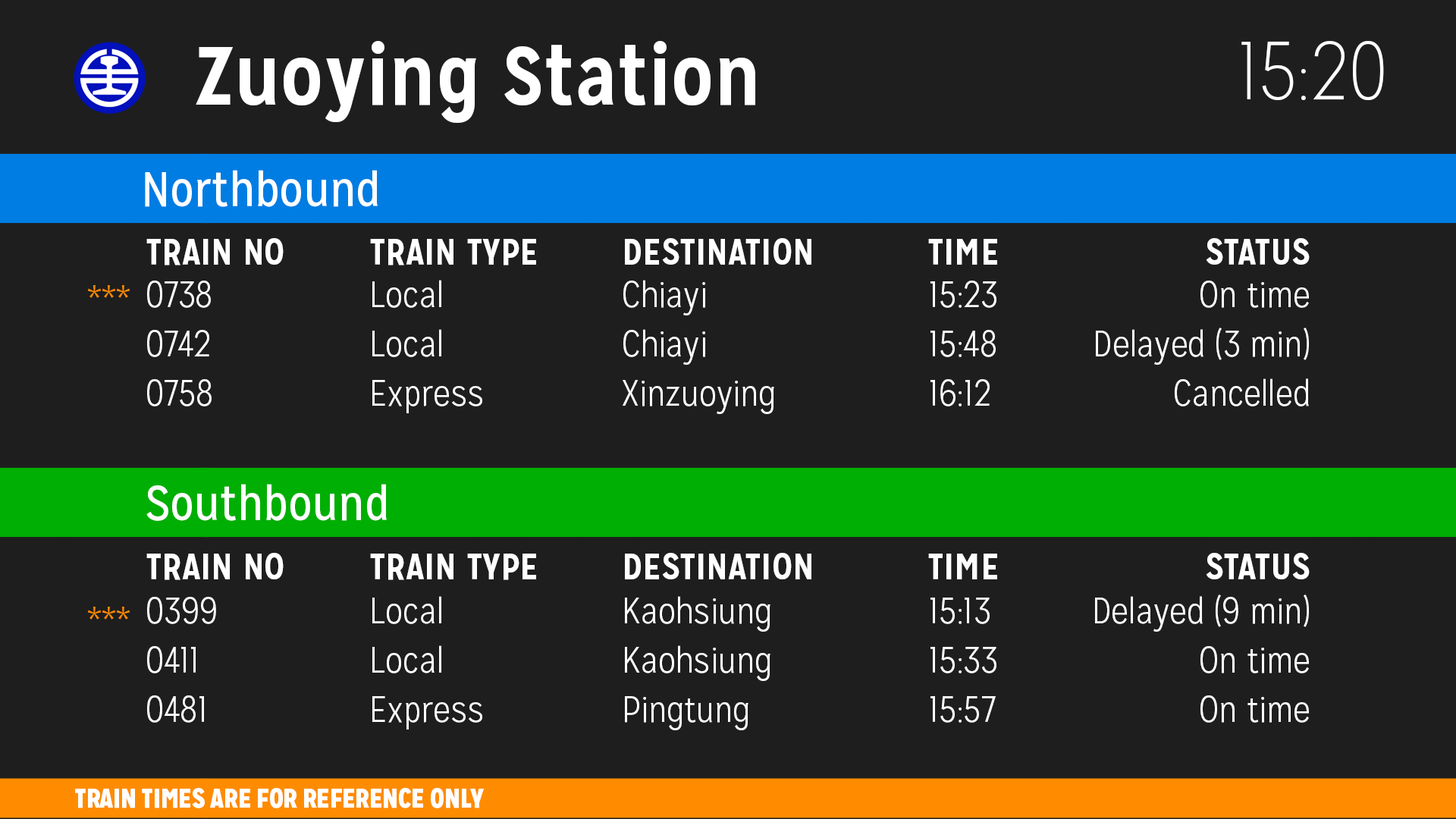
<style>
.page{position:relative;width:1456px;height:819px;background:#1e1e1e}
.page>*{position:absolute;margin:0}
.t1{font:82.2px "MissionGothic-Bold";color:#ffffff}
.t2{font:82.2px "MissionGothic-Thin";color:#ffffff}
.t3{font:49.1px "MissionGothic-Regular";color:#ffffff}
.t4{font:36.7px "MissionGothic-Bold";color:#ffffff}
.t5{font:36.7px "MissionGothic-Light";color:#ffffff}
.t6{font:36.7px "MissionGothic-Light";color:#ff8c00}
.t7{font:27.4px "MissionGothic-Black";color:#ffffff}
</style>
<div class="page">
<p class="t1" style="left:196px;top:41px;width:559px;height:82px">Zuoying Station</p>
<p class="t2" style="left:1241px;top:41px;width:143px;height:59px">15:20</p>
<p class="t3" style="left:145px;top:170px;width:233px;height:37px">Northbound</p>
<p class="t4" style="left:146px;top:238px;width:138px;height:27px">TRAIN NO</p>
<p class="t4" style="left:370px;top:239px;width:166px;height:26px">TRAIN TYPE</p>
<p class="t4" style="left:625px;top:238px;width:186px;height:27px">DESTINATION</p>
<p class="t4" style="left:928px;top:239px;width:69px;height:26px">TIME</p>
<p class="t4" style="left:1206px;top:238px;width:104px;height:27px">STATUS</p>
<p class="t5" style="left:147px;top:281px;width:64px;height:27px">0738</p>
<p class="t5" style="left:372px;top:280px;width:69px;height:28px">Local</p>
<p class="t5" style="left:623px;top:280px;width:82px;height:35px">Chiayi</p>
<p class="t5" style="left:930px;top:281px;width:66px;height:27px">15:23</p>
<p class="t5" style="left:1200px;top:281px;width:109px;height:27px">On time</p>
<p class="t6" style="left:87px;top:285px;width:43px;height:13px">***</p>
<p class="t5" style="left:147px;top:330px;width:62px;height:27px">0742</p>
<p class="t5" style="left:372px;top:329px;width:69px;height:28px">Local</p>
<p class="t5" style="left:623px;top:329px;width:82px;height:36px">Chiayi</p>
<p class="t5" style="left:930px;top:330px;width:66px;height:27px">15:48</p>
<p class="t5" style="left:1096px;top:328px;width:213px;height:37px">Delayed (3 min)</p>
<p class="t5" style="left:147px;top:379px;width:65px;height:27px">0758</p>
<p class="t5" style="left:372px;top:380px;width:110px;height:33px">Express</p>
<p class="t5" style="left:623px;top:380px;width:151px;height:34px">Xinzuoying</p>
<p class="t5" style="left:930px;top:379px;width:60px;height:27px">16:12</p>
<p class="t5" style="left:1175px;top:378px;width:134px;height:28px">Cancelled</p>
<p class="t3" style="left:146px;top:484px;width:241px;height:37px">Southbound</p>
<p class="t4" style="left:146px;top:553px;width:138px;height:27px">TRAIN NO</p>
<p class="t4" style="left:370px;top:554px;width:166px;height:26px">TRAIN TYPE</p>
<p class="t4" style="left:625px;top:553px;width:186px;height:26px">DESTINATION</p>
<p class="t4" style="left:928px;top:554px;width:69px;height:25px">TIME</p>
<p class="t4" style="left:1206px;top:553px;width:104px;height:26px">STATUS</p>
<p class="t5" style="left:147px;top:597px;width:69px;height:27px">0399</p>
<p class="t5" style="left:372px;top:596px;width:69px;height:28px">Local</p>
<p class="t5" style="left:625px;top:596px;width:145px;height:36px">Kaohsiung</p>
<p class="t5" style="left:930px;top:598px;width:60px;height:26px">15:13</p>
<p class="t5" style="left:1095px;top:595px;width:214px;height:37px">Delayed (9 min)</p>
<p class="t6" style="left:87px;top:607px;width:43px;height:13px">***</p>
<p class="t5" style="left:147px;top:646px;width:49px;height:27px">0411</p>
<p class="t5" style="left:372px;top:645px;width:69px;height:28px">Local</p>
<p class="t5" style="left:625px;top:645px;width:145px;height:36px">Kaohsiung</p>
<p class="t5" style="left:930px;top:647px;width:66px;height:26px">15:33</p>
<p class="t5" style="left:1200px;top:646px;width:109px;height:27px">On time</p>
<p class="t5" style="left:147px;top:695px;width:57px;height:28px">0481</p>
<p class="t5" style="left:372px;top:696px;width:110px;height:34px">Express</p>
<p class="t5" style="left:625px;top:696px;width:123px;height:34px">Pingtung</p>
<p class="t5" style="left:930px;top:696px;width:66px;height:27px">15:57</p>
<p class="t5" style="left:1200px;top:695px;width:109px;height:28px">On time</p>
<p class="t7" style="left:75px;top:788px;width:409px;height:20px">TRAIN TIMES ARE FOR REFERENCE ONLY</p>
</div>
